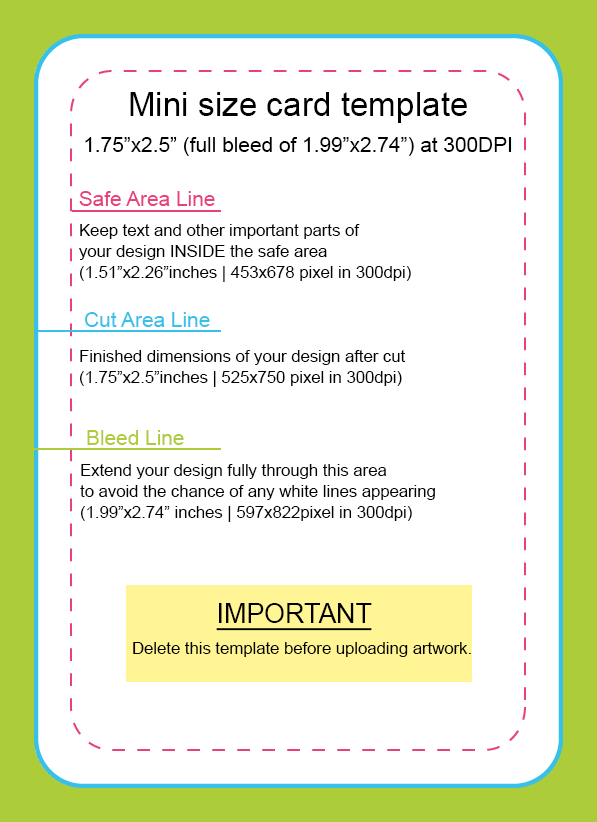
<style>
.page{position:relative;width:597px;height:822px;background:#ffffff}
.page>*{position:absolute;margin:0}
.t1{font:33.3px "ArialMT";color:#000000}
.t2{font:20.8px "ArialMT";color:#000000}
.t3{font:20.8px "ArialMT";color:#e7427c}
.t4{font:16.7px/20.8px "ArialMT";color:#010000}
.t5{font:16.7px/20.8px "ArialMT";color:#020300}
.t6{font:20.8px "ArialMT";color:#36c0ea}
.t7{font:20.8px "ArialMT";color:#adcc3a}
.t8{font:26.8px "ArialMT";color:#000000;text-decoration:underline}
.t9{font:16.7px "ArialMT";color:#000000}
</style>
<div class="page">
<p class="t1" style="left:130px;top:92px;width:337px;height:31px">Mini size card template</p>
<p class="t2" style="left:85px;top:137px;width:427px;height:19px">1.75”x2.5” (full bleed of 1.99”x2.74”) at 300DPI</p>
<p class="t3" style="left:79px;top:191px;width:136px;height:15px">Safe Area Line</p>
<p class="t4" style="left:79px;top:224px;width:332px;height:58px">Keep text and other important parts of<br>your design INSIDE the safe area<br>(1.51”x2.26”inches | 453<span class="t5">x</span>678 pixel in 300dpi)</p>
<p class="t6" style="left:85px;top:312px;width:125px;height:15px">Cut Area Line</p>
<p class="t4" style="left:79px;top:350px;width:327px;height:37px">Finished dimensions of your design after cut<br>(1.75”x2.5”inches | 525<span class="t5">x</span>750 pixel in 300dpi)</p>
<p class="t7" style="left:87px;top:430px;width:97px;height:15px">Bleed Line</p>
<p class="t5" style="left:80px;top:464px;width:355px;height:58px">Extend your design fully through this area<br>to avoid the chance of any white lines appearing<br>(1.99”x2.74” inches | 597x822pixel in 300dpi)</p>
<p class="t8" style="left:216px;top:603px;width:156px;height:28px">IMPORTANT</p>
<p class="t9" style="left:133px;top:642px;width:338px;height:15px">Delete this template before uploading artwork.</p>
</div>
